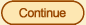
<style>
.page{position:relative;width:86px;height:25px;background:#fde7b2}
.page>*{position:absolute;margin:0}
.t1{font:12px "ArialMT";letter-spacing:-0.04em;color:#994700;font-weight:bold}
</style>
<div class="page">
<p class="t1" style="left:19px;top:8px;width:47px;height:10px">Continue</p>
</div>
